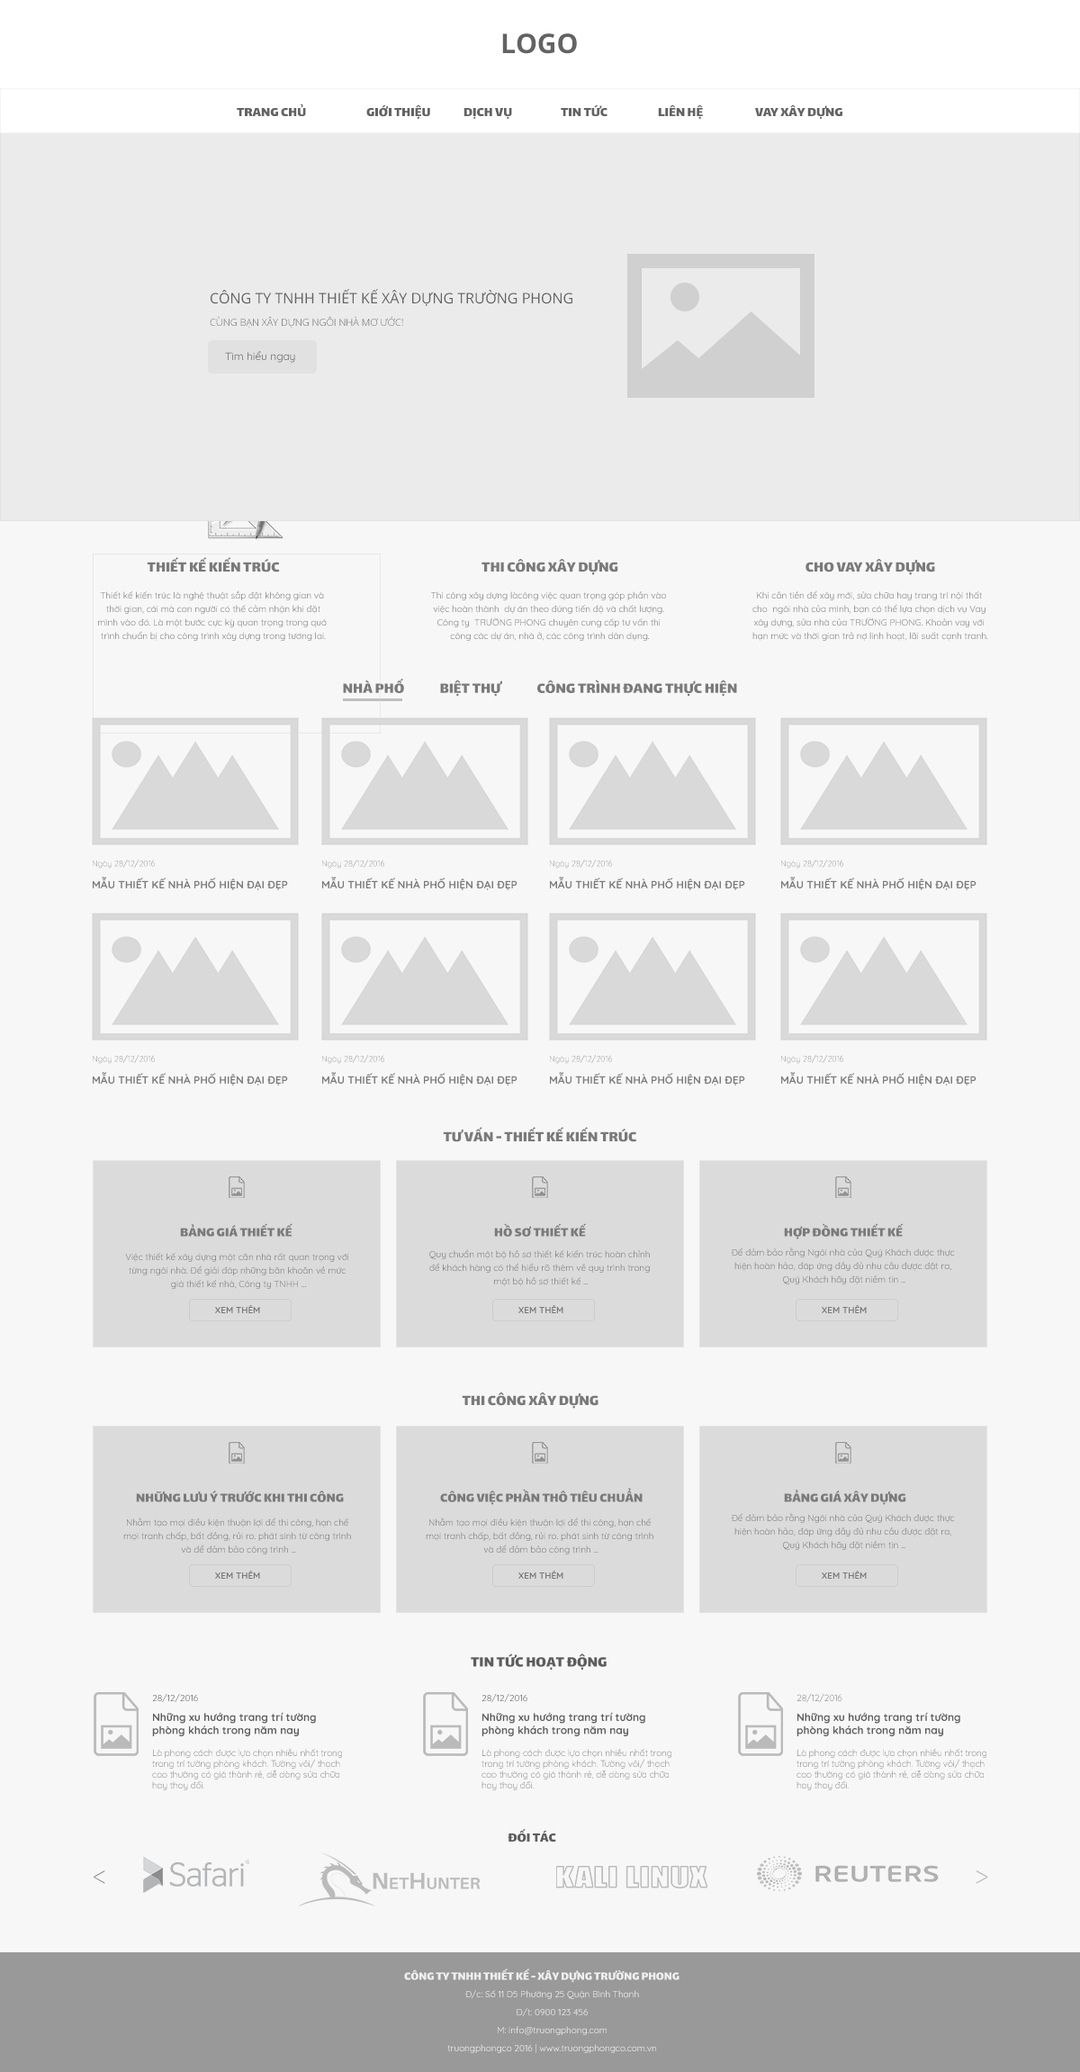
<style>
.page{position:relative;width:1080px;height:2072px;background:#f7f7f7}
.page>*{position:absolute;margin:0}
.t1{font:27px "OpenSans-Bold";color:#636363}
.t2{font:14.4px "Lalezar-Regular";color:#636363}
.t3{font:14.4px/22.5px "OpenSans";color:#636363}
.t4{font:9.9px/22.5px "OpenSans-Light";color:#636363}
.t5{font:10.8px "Quicksand-Regular";color:#636363}
.t6{font:9px/13.5px "Quicksand-Regular";color:#7a7a7a}
.t7{font:16.2px/13.5px "Lalezar-Regular";color:#7a7a7a}
.t8{font:16.2px "Lalezar-Regular";color:#7a7a7a}
.t9{font:8.1px "Quicksand-Light"}
.t10{font:10.8px "Quicksand-Bold";color:#7a7a7a}
.t11{font:14.4px "Lalezar-Regular";color:#7a7a7a}
.t12{font:9px "Quicksand-Bold";color:#7a7a7a}
.t13{font:16.2px "Lalezar-Regular";color:#5e5c5c}
.t14{font:9px "Quicksand-Regular"}
.t15{font:9px "Quicksand-Light"}
.t16{font:10.8px "Quicksand-Bold";color:#5e5c5c}
.t17{font:14.4px "Lalezar-Regular";color:#5e5c5c}
.t18{font:27px "Quicksand-Light";color:#959595}
.t19{font:27px "Quicksand-Light";color:#b7b7b7}
.t20{font:12.6px "Lalezar-Regular";color:#efefef}
.t21{font:9px/18px "Quicksand-Regular";color:#efefef}
</style>
<div class="page">
<p class="t1" style="left:502px;top:33px;width:75px;height:21px">LOGO</p>
<p class="t2" style="left:237px;top:104px;width:605px;height:15px">TRANG CHỦ  GIỚI THIỆU  DỊCH VỤ  TIN TỨC   LIÊN HỆ  VAY XÂY DỰNG</p>
<p class="t3" style="left:210px;top:289px;width:362px;height:39px">CÔNG TY TNHH THIẾT KẾ XÂY DỰNG TRƯỜNG PHONG<br><span class="t4">CÙNG BẠN XÂY DỰNG NGÔI NHÀ MƠ ƯỚC!</span></p>
<p class="t5" style="left:225px;top:351px;width:70px;height:12px">Tìm hiểu ngay</p>
<p class="t6" style="left:98px;top:557px;width:229px;height:84px;text-align:center"><span class="t7">THIẾT KẾ KIẾN TRÚC<br><br></span>Thiết kế kiến trúc là nghệ thuật sắp đặt không gian và <br>thời gian, cái mà con người có thế cảm nhận khi đặt<br>mình vào đó. Là một bước cực kỳ quan trọng trong quá <br>trình chuẩn bị cho công trình xây dựng trong tương lai.</p>
<p class="t6" style="left:431px;top:559px;width:235px;height:82px;text-align:center"><span class="t7">THI CÔNG XÂY DỰNG<br><br></span>Thi công xây dựng làcông việc quan trọng góp phần vào <br>việc hoàn thành  dự án theo đúng tiến độ và chất lượng. <br>Công ty  TRƯỜNG PHONG chuyên cung cấp tư vấn thi <br>công các dự án, nhà ở, các công trình dân dụng.</p>
<p class="t6" style="left:752px;top:559px;width:236px;height:82px;text-align:center"><span class="t7">CHO VAY XÂY DỰNG<br><br></span>Khi cần tiền để xây mới, sửa chữa hay trang trí nội thất <br>cho  ngôi nhà của mình, bạn có thể lựa chọn dịch vụ Vay <br>xây dựng, sửa nhà của TRƯỜNG PHONG. Khoản vay với <br>hạn mức và thời gian trả nợ linh hoạt, lãi suất cạnh tranh.</p>
<p class="t8" style="left:343px;top:678px;width:394px;height:19px">NHÀ PHỐ  BIỆT THỰ  CÔNG TRÌNH ĐANG THỰC HIỆN</p>
<p class="t9" style="left:93px;top:860px;width:62px;height:8px">Ngày 28/12/2016</p>
<p class="t9" style="left:322px;top:860px;width:62px;height:8px">Ngày 28/12/2016</p>
<p class="t9" style="left:550px;top:860px;width:62px;height:8px">Ngày 28/12/2016</p>
<p class="t9" style="left:781px;top:860px;width:62px;height:8px">Ngày 28/12/2016</p>
<p class="t10" style="left:93px;top:877px;width:195px;height:13px">MẪU THIẾT KẾ NHÀ PHỐ HIỆN ĐẠI ĐẸP</p>
<p class="t10" style="left:322px;top:877px;width:196px;height:13px">MẪU THIẾT KẾ NHÀ PHỐ HIỆN ĐẠI ĐẸP</p>
<p class="t10" style="left:550px;top:877px;width:195px;height:13px">MẪU THIẾT KẾ NHÀ PHỐ HIỆN ĐẠI ĐẸP</p>
<p class="t10" style="left:781px;top:877px;width:195px;height:13px">MẪU THIẾT KẾ NHÀ PHỐ HIỆN ĐẠI ĐẸP</p>
<p class="t9" style="left:93px;top:1055px;width:62px;height:9px">Ngày 28/12/2016</p>
<p class="t9" style="left:322px;top:1055px;width:62px;height:9px">Ngày 28/12/2016</p>
<p class="t9" style="left:550px;top:1055px;width:62px;height:9px">Ngày 28/12/2016</p>
<p class="t9" style="left:781px;top:1055px;width:62px;height:9px">Ngày 28/12/2016</p>
<p class="t10" style="left:93px;top:1072px;width:195px;height:13px">MẪU THIẾT KẾ NHÀ PHỐ HIỆN ĐẠI ĐẸP</p>
<p class="t10" style="left:322px;top:1072px;width:196px;height:13px">MẪU THIẾT KẾ NHÀ PHỐ HIỆN ĐẠI ĐẸP</p>
<p class="t10" style="left:550px;top:1072px;width:195px;height:13px">MẪU THIẾT KẾ NHÀ PHỐ HIỆN ĐẠI ĐẸP</p>
<p class="t10" style="left:781px;top:1072px;width:195px;height:13px">MẪU THIẾT KẾ NHÀ PHỐ HIỆN ĐẠI ĐẸP</p>
<p class="t8" style="left:443px;top:1127px;width:193px;height:15px">TƯ VẤN - THIẾT KẾ KIẾN TRÚC</p>
<p class="t11" style="left:180px;top:1223px;width:112px;height:14px">BẢNG GIÁ THIẾT KẾ</p>
<p class="t11" style="left:494px;top:1223px;width:92px;height:14px">HỒ SƠ THIẾT KẾ</p>
<p class="t11" style="left:784px;top:1223px;width:120px;height:16px">HỢP ĐỒNG THIẾT KẾ</p>
<p class="t6" style="left:125px;top:1253px;width:224px;height:36px;text-align:center">Việc thiết kế xây dựng một căn nhà rất quan trọng với <br>từng ngôi nhà. Để giải đáp những băn khoăn về mức <br>giá thiết kế nhà, Công ty TNHH ...</p>
<p class="t6" style="left:429px;top:1249px;width:221px;height:37px;text-align:center">Quy chuẩn một bộ hồ sơ thiết kế kiến trúc hoàn chỉnh <br>để khách hàng có thể hiểu rõ thêm về quy trình trong <br>một bộ hồ sơ thiết kế ...</p>
<p class="t6" style="left:732px;top:1247px;width:223px;height:37px;text-align:center">Để đảm bảo rằng Ngôi nhà của Quý Khách được thực <br>hiện hoàn hảo, đáp ứng đầy đủ nhu cầu được đặt ra, <br>Quý Khách hãy đặt niềm tin ...</p>
<p class="t12" style="left:215px;top:1305px;width:45px;height:8px">XEM THÊM</p>
<p class="t12" style="left:518px;top:1305px;width:45px;height:8px">XEM THÊM</p>
<p class="t12" style="left:822px;top:1305px;width:45px;height:8px">XEM THÊM</p>
<p class="t8" style="left:462px;top:1392px;width:136px;height:16px">THI CÔNG XÂY DỰNG</p>
<p class="t11" style="left:136px;top:1490px;width:208px;height:12px">NHỮNG LƯU Ý TRƯỚC KHI THI CÔNG</p>
<p class="t11" style="left:440px;top:1488px;width:203px;height:17px">CÔNG VIỆC PHẦN THÔ TIÊU CHUẨN</p>
<p class="t11" style="left:784px;top:1490px;width:122px;height:15px">BẢNG GIÁ XÂY DỰNG</p>
<p class="t6" style="left:123px;top:1517px;width:228px;height:37px;text-align:center">Nhằm tạo mọi điều kiện thuận lợi để thi công, hạn chế <br>mọi tranh chấp, bất đồng, rủi ro. phát sinh từ công trình <br>và để đảm bảo công trình ...</p>
<p class="t6" style="left:426px;top:1517px;width:227px;height:37px;text-align:center">Nhằm tạo mọi điều kiện thuận lợi để thi công, hạn chế <br>mọi tranh chấp, bất đồng, rủi ro. phát sinh từ công trình <br>và để đảm bảo công trình ...</p>
<p class="t6" style="left:732px;top:1513px;width:223px;height:37px;text-align:center">Để đảm bảo rằng Ngôi nhà của Quý Khách được thực <br>hiện hoàn hảo, đáp ứng đầy đủ nhu cầu được đặt ra, <br>Quý Khách hãy đặt niềm tin ...</p>
<p class="t12" style="left:215px;top:1570px;width:45px;height:9px">XEM THÊM</p>
<p class="t12" style="left:518px;top:1570px;width:45px;height:9px">XEM THÊM</p>
<p class="t12" style="left:822px;top:1570px;width:45px;height:9px">XEM THÊM</p>
<p class="t13" style="left:471px;top:1653px;width:136px;height:17px">TIN TỨC HOẠT ĐỘNG</p>
<p class="t14" style="left:152px;top:1693px;width:46px;height:10px">28/12/2016</p>
<p class="t14" style="left:482px;top:1693px;width:45px;height:10px">28/12/2016</p>
<p class="t15" style="left:797px;top:1693px;width:45px;height:10px">28/12/2016</p>
<p class="t16" style="left:152px;top:1712px;width:164px;height:24px">Những xu hướng trang trí tường <br>phòng khách trong năm nay</p>
<p class="t16" style="left:482px;top:1712px;width:163px;height:24px">Những xu hướng trang trí tường <br>phòng khách trong năm nay</p>
<p class="t16" style="left:796px;top:1712px;width:164px;height:24px">Những xu hướng trang trí tường <br>phòng khách trong năm nay</p>
<p class="t15" style="left:152px;top:1748px;width:190px;height:42px">Là phong cách được lựa chọn nhiều nhất trong <br>trang trí tường phòng khách. Tường vôi/ thạch <br>cao thường có giá thành rẻ, dễ dàng sửa chữa <br>hay thay đổi.</p>
<p class="t15" style="left:482px;top:1748px;width:189px;height:42px">Là phong cách được lựa chọn nhiều nhất trong <br>trang trí tường phòng khách. Tường vôi/ thạch <br>cao thường có giá thành rẻ, dễ dàng sửa chữa <br>hay thay đổi.</p>
<p class="t15" style="left:796px;top:1748px;width:190px;height:42px">Là phong cách được lựa chọn nhiều nhất trong <br>trang trí tường phòng khách. Tường vôi/ thạch <br>cao thường có giá thành rẻ, dễ dàng sửa chữa <br>hay thay đổi.</p>
<p class="t17" style="left:508px;top:1829px;width:48px;height:13px">ĐỐI TÁC</p>
<p class="t18" style="left:94px;top:1870px;width:11px;height:14px">&lt;</p>
<p class="t19" style="left:976px;top:1870px;width:12px;height:14px">&gt;</p>
<p class="t20" style="left:404px;top:1968px;width:276px;height:15px">CÔNG TY TNHH THIẾT KẾ - XÂY DỰNG TRƯỜNG PHONG</p>
<p class="t21" style="left:447px;top:1989px;width:209px;height:64px;text-align:center">Đ/c: Số 11 D5 Phường 25 Quận Bình Thạnh<br>Đ/t: 0900 123 456<br>M: info@truongphong.com<br>truongphongco 2016 | www.truongphongco.com.vn</p>
</div>
